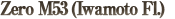
<style>
.page{position:relative;width:175px;height:19px;background:#ffffff}
.page>*{position:absolute;margin:0}
.t1{font:18px "RyuminPro-ExBold";letter-spacing:-0.08em;color:#4a3f32;font-weight:bold;scale:0.9 1}
</style>
<div class="page">
<p class="t1" style="left:0px;top:1px;width:165px;height:18px">Zero M53 (Iwamoto Fl.)</p>
</div>
